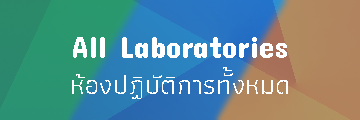
<style>
.page{position:relative;width:360px;height:120px}
.page>*{position:absolute;margin:0}
.t1{font:30.6px "ConcertOne-Regular";letter-spacing:0.01em;color:#ffffff}
.t2{font:27px "Athiti-Regular";letter-spacing:0.01em;color:#ffffff}
</style>
<div class="page">
<p class="t1" style="left:73px;top:37px;width:214px;height:21px">All Laboratories</p>
<p class="t2" style="left:72px;top:67px;width:216px;height:32px">ห้องปฏิบัติการทั้งหมด</p>
</div>
